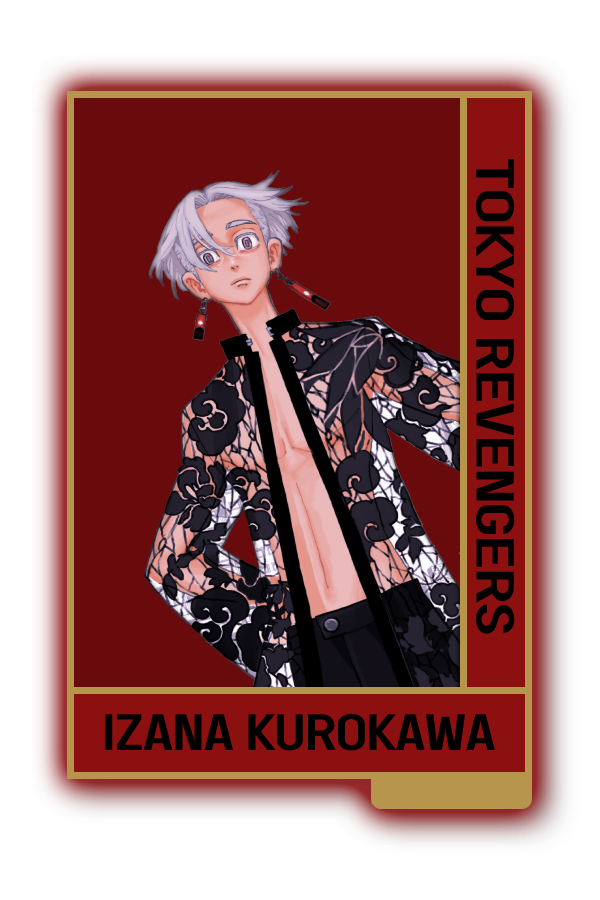
<style>
.page{position:relative;width:600px;height:900px;background:#690b0c}
.page>*{position:absolute;margin:0}
.t1{font:50px "aAreaKilometer50";color:#000000;scale:1.2 1}
.t2{font:47.8px "aAreaKilometer50";color:#000000;scale:1.13 1}
</style>
<div class="page">
<p class="t1" style="left:475px;top:159px;width:40px;height:475px;rotate:90deg">TOKYO REVENGERS</p>
<p class="t2" style="left:105px;top:713px;width:390px;height:38px">IZANA KUROKAWA</p>
</div>
